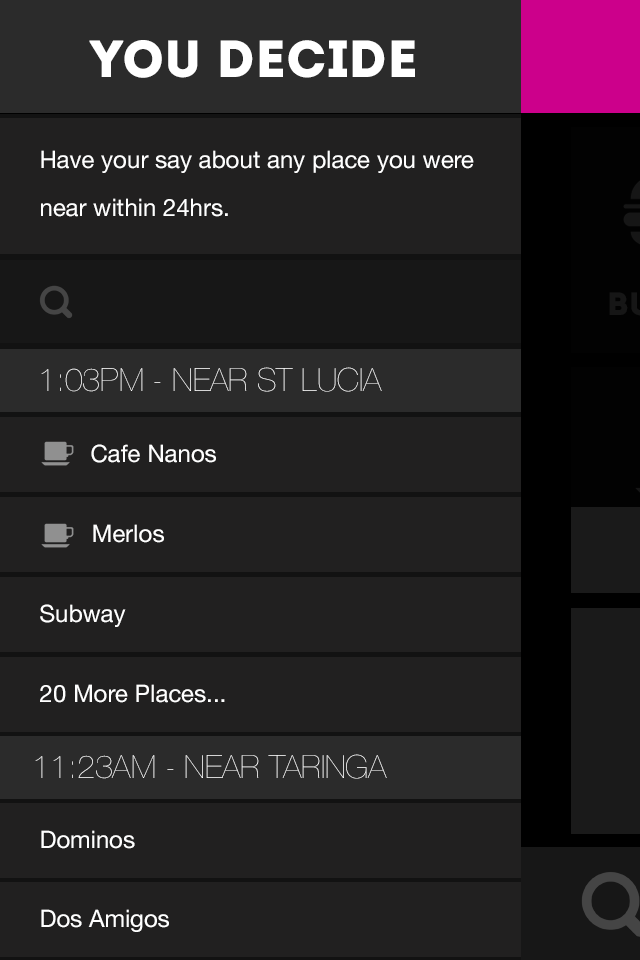
<style>
.page{position:relative;width:640px;height:960px;background:#212020}
.page>*{position:absolute;margin:0}
.t1{font:52px "Intro";color:#ffffff}
.t2{font:24px/48px "HelveticaNeue";color:#ffffff}
.t3{font:32px "HelveticaNeue-UltraLight";color:#ffffff}
.t4{font:24px "HelveticaNeue";color:#ffffff}
</style>
<div class="page">
<p class="t1" style="left:89px;top:40px;width:326px;height:38px">YOU DECIDE</p>
<p class="t2" style="left:41px;top:150px;width:433px;height:67px">Have your say about any place you were near within 24hrs.</p>
<p class="t3" style="left:41px;top:367px;width:341px;height:25px">1:03PM - NEAR ST LUCIA</p>
<p class="t4" style="left:91px;top:444px;width:125px;height:19px">Cafe Nanos</p>
<p class="t4" style="left:93px;top:524px;width:71px;height:19px">Merlos</p>
<p class="t4" style="left:40px;top:604px;width:86px;height:23px">Subway</p>
<p class="t4" style="left:40px;top:684px;width:185px;height:19px">20 More Places...</p>
<p class="t3" style="left:35px;top:754px;width:352px;height:25px">11:23AM - NEAR TARINGA</p>
<p class="t4" style="left:41px;top:830px;width:94px;height:19px">Dominos</p>
<p class="t4" style="left:41px;top:909px;width:128px;height:23px">Dos Amigos</p>
</div>
